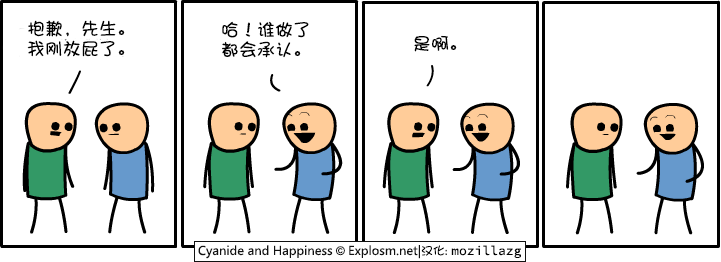
<style>
.page{position:relative;width:721px;height:262px;background:#ffffff}
.page>*{position:absolute;margin:0}
.t1{font:18px/20px "DFPShaoNvW5";color:#000000}
.t2{font:18px "DFPShaoNvW5";color:#000000}
</style>
<div class="page">
<p class="t1" style="left:27px;top:20px;width:98px;height:37px">抱歉，先生。<br>我刚放屁了。</p>
<p class="t1" style="left:222px;top:21px;width:87px;height:37px">哈！谁做了<br>都会承认。</p>
<p class="t2" style="left:414px;top:35px;width:43px;height:17px">是啊。</p>
</div>
